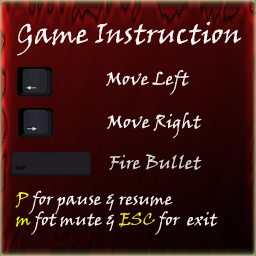
<style>
.page{position:relative;width:256px;height:256px}
.page>*{position:absolute;margin:0}
.t1{font:28px "VinerHandITC";color:#fbf5f5}
.t2{font:18px "VinerHandITC";color:#fbf5f5}
.t3{font:18px "VinerHandITC";color:#d6d6d6}
.t4{font:17px "VinerHandITC";color:#fbf5f5}
.t5{font:17px "VinerHandITC";color:#f8fb03}
.t6{font:17px "VinerHandITC";color:#effe01}
.t7{font:17px "VinerHandITC";color:#ece903}
</style>
<div class="page">
<p class="t1" style="left:17px;top:21px;width:225px;height:35px">Game Instruction</p>
<p class="t2" style="left:106px;top:70px;width:83px;height:25px">Move Left</p>
<p class="t2" style="left:107px;top:112px;width:95px;height:26px">Move Right</p>
<p class="t3" style="left:109px;top:154px;width:93px;height:16px">Fire Bullet</p>
<p class="t4" style="left:15px;top:190px;width:203px;height:45px"><span class="t5">P </span>for pause &amp; resume <br><span class="t6">m </span>fot mute &amp; <span class="t7">ESC</span> for  exit</p>
</div>
